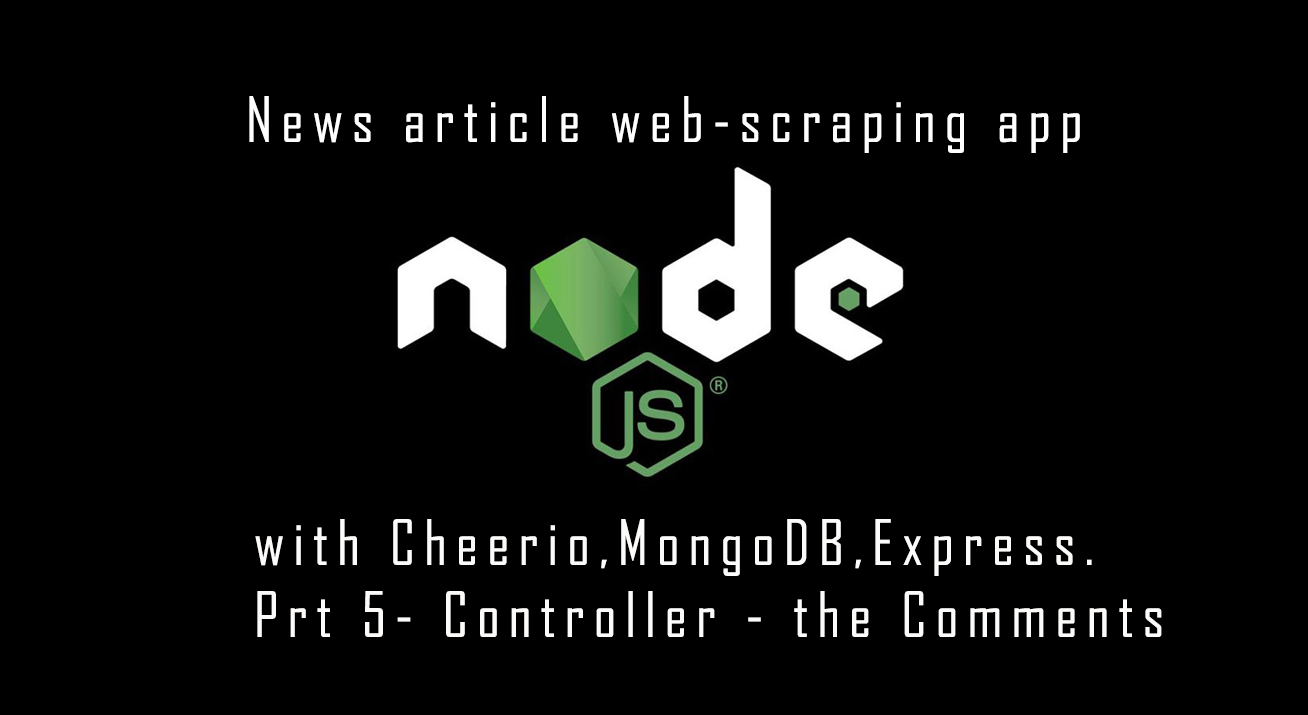
<style>
.page{position:relative;width:1308px;height:715px;background:#000000}
.page>*{position:absolute;margin:0}
.t1{font:60px "AgencyFB-Reg";letter-spacing:0.15em;color:#ffffff}
.t2{font:60px "AgencyFB-Reg";letter-spacing:0.15em;color:#fcfbfa}
</style>
<div class="page">
<p class="t1" style="left:249px;top:96px;width:831px;height:57px">News article web-scraping app</p>
<p class="t2" style="left:255px;top:519px;width:907px;height:118px">with Cheerio,MongoDB,Express.<br>Prt 5- Controller - the Comments</p>
</div>
